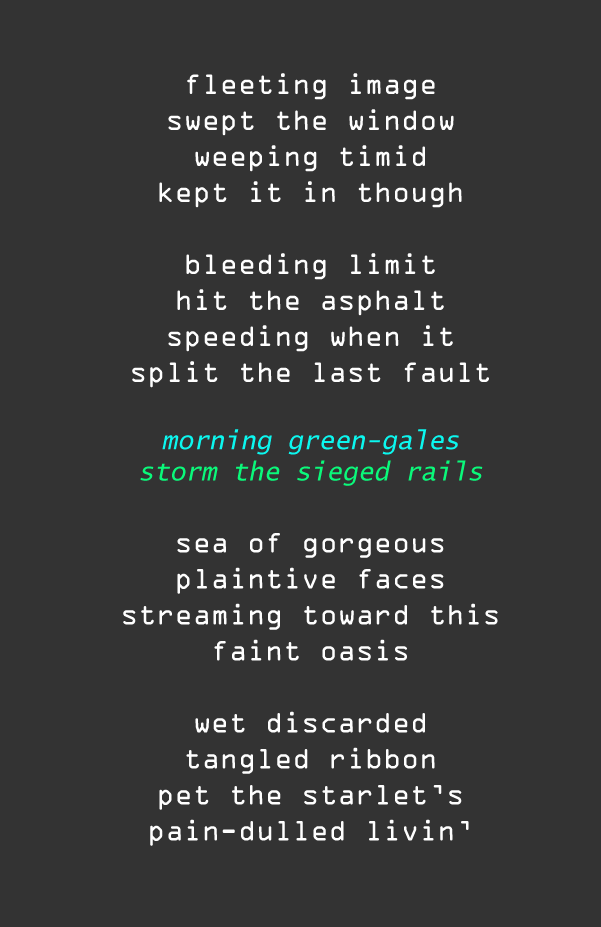
<style>
.page{position:relative;width:601px;height:927px;background:#333333}
.page>*{position:absolute;margin:0}
.t1{font:30px "OCRAExtended";color:#fefefe}
.t2{font:26px "LucidaSans-TypewriterOblique";color:#0bf7ef}
.t3{font:26px "LucidaSans-TypewriterOblique";color:#0af97a}
</style>
<div class="page">
<p class="t1" style="left:123px;top:73px;width:375px;height:773px;text-align:center">fleeting image<br>swept the window<br>weeping timid<br>kept it in though<br><br>bleeding limit<br>hit the asphalt<br>speeding when it<br>split the last fault<br><br><span class="t2">morning green-gales<br></span><span class="t3">storm the sieged rails<br></span><br>sea of gorgeous<br>plaintive faces<br>streaming toward this<br>faint oasis<br><br>wet discarded<br>tangled ribbon<br>pet the starlet’s<br>pain-dulled livin’</p>
</div>
